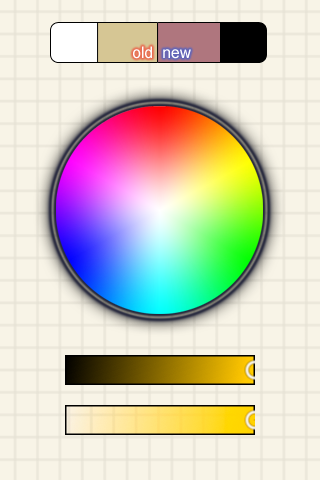
<style>
.page{position:relative;width:320px;height:480px;background:#f8f4e7}
.page>*{position:absolute;margin:0}
.t1{font:16px "ArialMT";color:#ffffff}
</style>
<div class="page">
<p class="t1" style="left:133px;top:46px;width:19px;height:13px">old</p>
<p class="t1" style="left:163px;top:49px;width:28px;height:10px">new</p>
</div>
